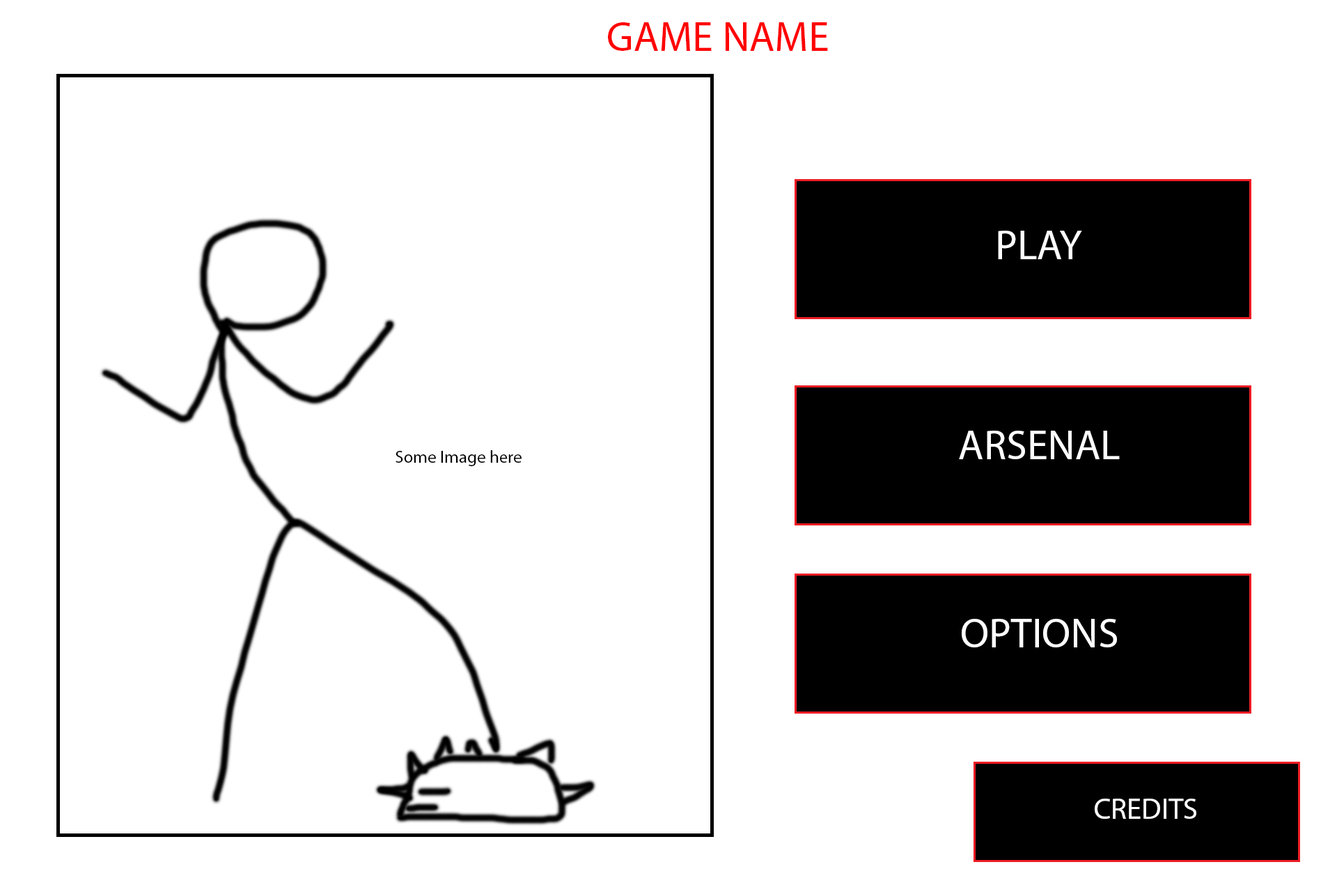
<style>
.page{position:relative;width:1337px;height:892px;background:#ffffff}
.page>*{position:absolute;margin:0}
.t1{font:41.8px "MyriadPro-Regular";color:#ff0000}
.t2{font:41.8px "MyriadPro-Regular";color:#ffffff}
.t3{font:17.4px "MyriadPro-Regular";color:#000000}
.t4{font:29.9px "MyriadPro-Regular";color:#ffffff}
</style>
<div class="page">
<p class="t1" style="left:608px;top:22px;width:220px;height:29px">GAME NAME</p>
<p class="t2" style="left:998px;top:231px;width:84px;height:28px">PLAY</p>
<p class="t2" style="left:959px;top:430px;width:161px;height:29px">ARSENAL</p>
<p class="t3" style="left:396px;top:450px;width:126px;height:16px">Some Image here</p>
<p class="t2" style="left:962px;top:619px;width:155px;height:28px">OPTIONS</p>
<p class="t4" style="left:1095px;top:798px;width:102px;height:20px">CREDITS</p>
</div>
